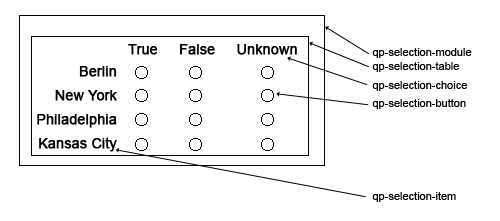
<style>
.page{position:relative;width:500px;height:221px;background:#ffffff}
.page>*{position:absolute;margin:0}
.t1{font:14px "ArialMT";color:#000000;font-weight:bold}
.t2{font:11px "ArialMT";color:#000000}
.t3{font:14px/24px "ArialMT";color:#000000;font-weight:bold}
</style>
<div class="page">
<p class="t1" style="left:128px;top:44px;width:169px;height:11px">True     False     Unknown</p>
<p class="t2" style="left:372px;top:48px;width:100px;height:10px">qp-selection-module</p>
<p class="t2" style="left:372px;top:62px;width:87px;height:10px">qp-selection-table</p>
<p class="t3" style="left:37px;top:66px;width:80px;height:86px;text-align:right">Berlin<br>New York<br>Philadelphia<br>Kansas City</p>
<p class="t2" style="left:372px;top:81px;width:95px;height:10px">qp-selection-choice</p>
<p class="t2" style="left:372px;top:99px;width:94px;height:10px">qp-selection-button</p>
<p class="t2" style="left:372px;top:192px;width:84px;height:10px">qp-selection-item</p>
</div>
